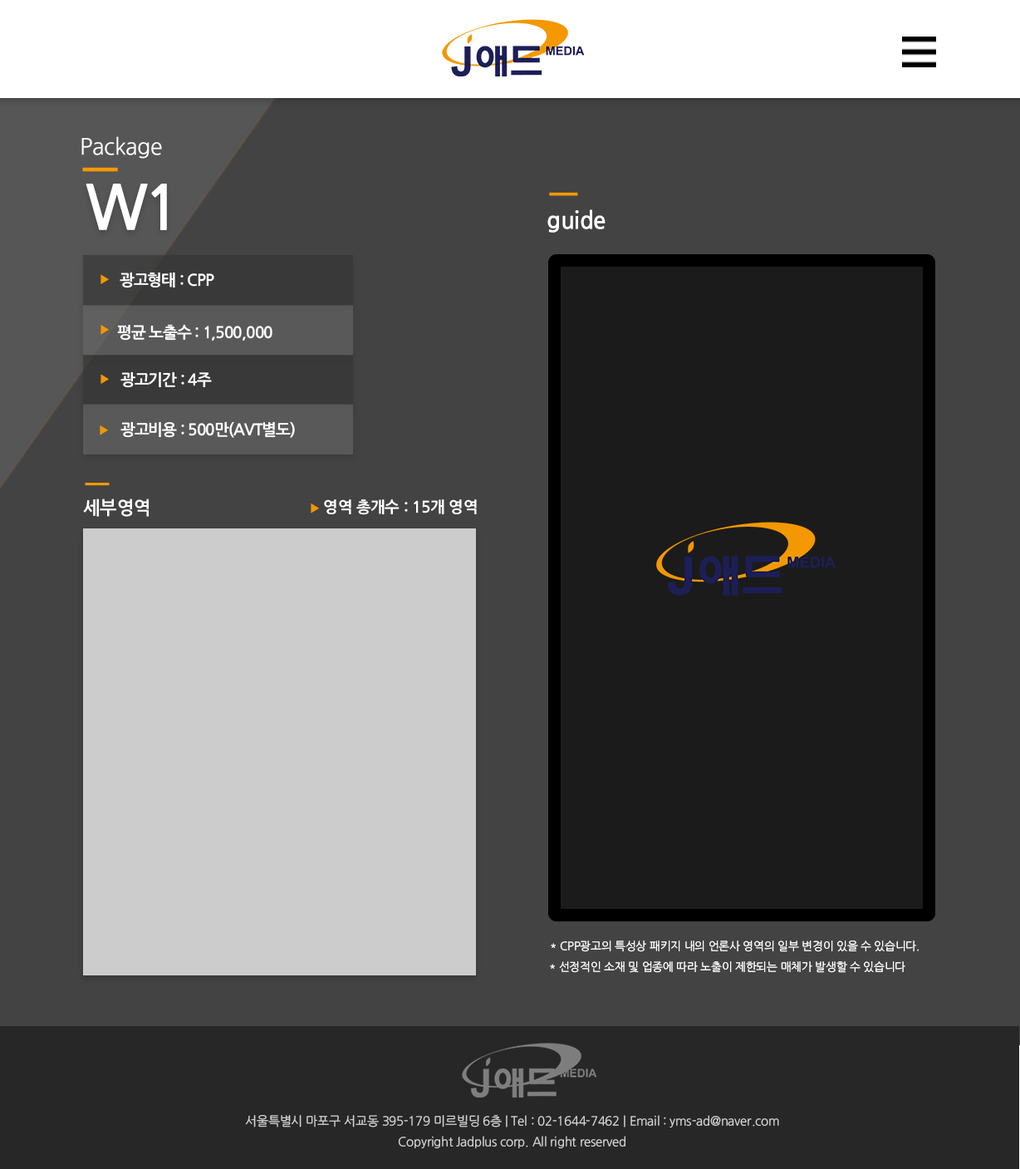
<style>
.page{position:relative;width:1020px;height:1169px;background:#434343}
.page>*{position:absolute;margin:0}
.t1{font:22.4px "NanumGothicOTF";letter-spacing:-0.015em;color:#ffffff}
.t2{font:61.2px "NanumGothicOTFBold";letter-spacing:-0.065em;color:#ffffff}
.t3{font:23.4px "NanumGothicOTFBold";letter-spacing:-0.015em;color:#ffffff}
.t4{font:15.8px "NanumGothicOTFBold";letter-spacing:-0.045em;color:#ffffff}
.t5{font:18.1px "NanumGothicOTFBold";letter-spacing:-0.015em;color:#ffffff}
.t6{font:15.5px "NanumGothicOTFBold";letter-spacing:-0.015em;color:#ffffff}
.t7{font:11.4px "NanumGothicOTF";letter-spacing:-0.015em;color:#ffffff}
.t8{font:12.5px/20.8px "NanumGothicOTF";letter-spacing:-0.015em;color:#d4d4d4}
</style>
<div class="page">
<p class="t1" style="left:81px;top:136px;width:81px;height:23px">Package</p>
<p class="t2" style="left:86px;top:184px;width:81px;height:46px">W1</p>
<p class="t3" style="left:547px;top:209px;width:59px;height:24px">guide</p>
<p class="t4" style="left:120px;top:272px;width:94px;height:16px">광고형태 : CPP</p>
<p class="t4" style="left:117px;top:324px;width:155px;height:17px">평균 노출수 : 1,500,000</p>
<p class="t4" style="left:120px;top:371px;width:92px;height:17px">광고기간 : 4주</p>
<p class="t4" style="left:120px;top:421px;width:175px;height:17px">광고비용 : 500만(AVT별도)</p>
<p class="t5" style="left:83px;top:498px;width:66px;height:19px">세부영역</p>
<p class="t6" style="left:324px;top:499px;width:153px;height:16px">영역 총개수 : 15개 영역</p>
<p class="t7" style="left:551px;top:940px;width:368px;height:12px">* CPP광고의 특성상 패키지 내의 언론사 영역의 일부 변경이 있을 수 있습니다.</p>
<p class="t7" style="left:550px;top:961px;width:356px;height:12px">* 선정적인 소재 및 업종에 따라 노출이 제한되는 매체가 발생할 수 있습니다</p>
<p class="t8" style="left:245px;top:1115px;width:534px;height:34px;text-align:center">서울특별시 마포구 서교동 395-179 미르빌딩 6층 | Tel : 02-1644-7462 | Email : yms-ad@naver.com<br>Copyright Jadplus corp. All right reserved</p>
</div>
